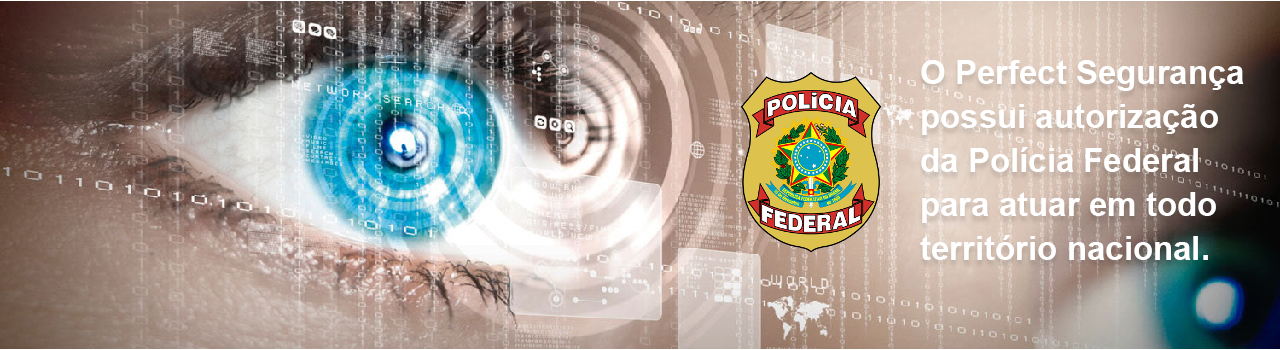
<style>
.page{position:relative;width:1280px;height:350px}
.page>*{position:absolute;margin:0}
.t1{font:33px/44px "Arial-BoldMT";color:#ffffff}
</style>
<div class="page">
<p class="t1" style="left:920px;top:60px;width:324px;height:200px">O Perfect Segurança possui autorização da Polícia Federal para atuar em todo território nacional.</p>
</div>
